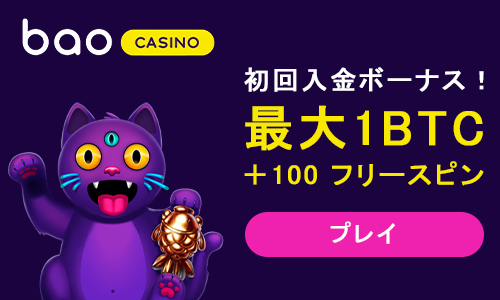
<style>
.page{position:relative;width:500px;height:300px;background:#1b033f}
.page>*{position:absolute;margin:0}
.t1{font:26.4px "MS-PGothic";letter-spacing:0.07em;color:#ffffff;text-transform:uppercase;font-weight:bold}
.t2{font:49.5px "MS-PGothic";letter-spacing:0.07em;color:#f9e800;text-transform:uppercase;font-weight:bold}
.t3{font:27.3px "MS-PGothic";letter-spacing:0.07em;color:#f9e800;text-transform:uppercase;font-weight:bold}
.t4{font:50.7px "MS-PGothic";letter-spacing:0.07em;color:#f9e800;text-transform:uppercase;font-weight:bold}
.t5{font:24px "MS-PGothic";letter-spacing:0.07em;color:#ffffff;text-transform:uppercase;font-weight:bold}
</style>
<div class="page">
<p class="t1" style="left:244px;top:67px;width:240px;height:25px">初回入金ボーナス！</p>
<p class="t2" style="left:245px;top:105px;width:238px;height:46px">最大1BTC</p>
<p class="t3" style="left:244px;top:161px;width:240px;height:26px"><span class="t4"><br></span>＋100 フリースピン</p>
<p class="t5" style="left:330px;top:221px;width:65px;height:23px">プレイ</p>
</div>
